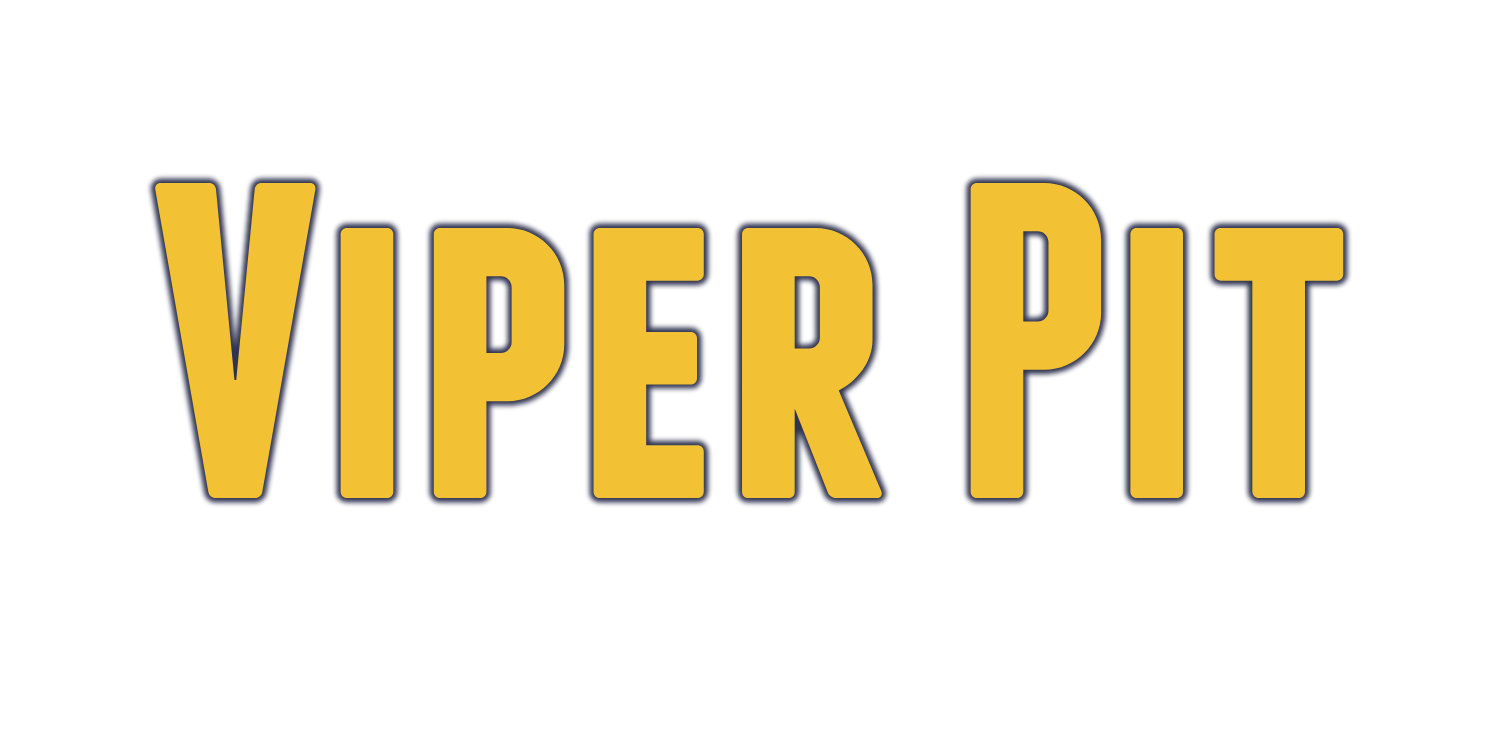
<style>
.page{position:relative;width:1500px;height:750px;background:#ffffff}
.page>*{position:absolute;margin:0}
.t1{font:450px "FranchiseFree-Bold";color:#f2c234}
</style>
<div class="page">
<p class="t1" style="left:154px;top:182px;width:1190px;height:317px">Viper Pit</p>
</div>
